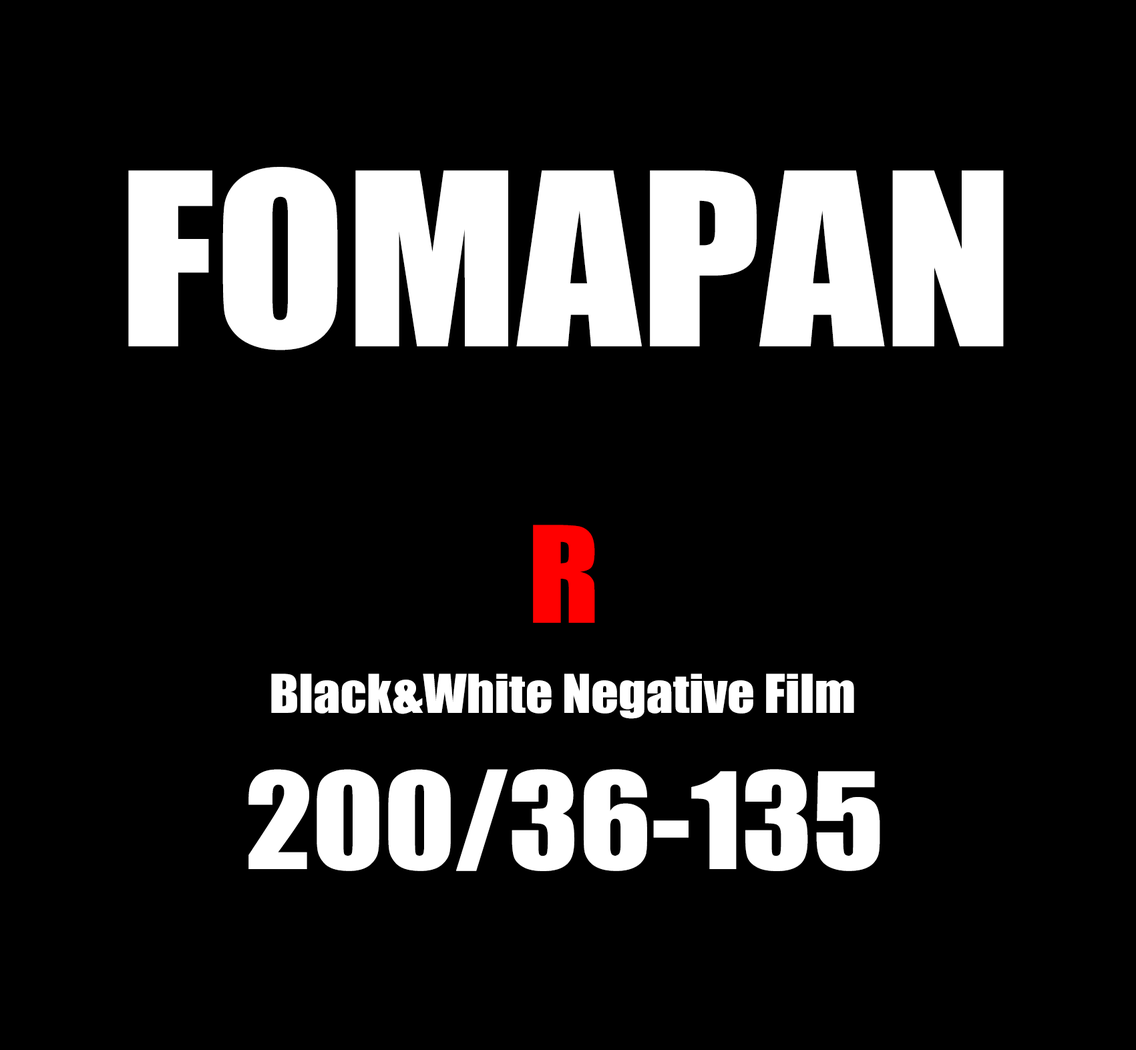
<style>
.page{position:relative;width:1136px;height:1050px;background:#000000}
.page>*{position:absolute;margin:0}
.t1{font:222.2px "Impact";color:#ffffff;scale:1.08 1}
.t2{font:123.4px "Impact";color:#ff0000;scale:1.08 1}
.t3{font:49.4px "Impact";color:#ffffff;scale:1.08 1}
.t4{font:123.4px "Impact";color:#ffffff;scale:1.08 1}
</style>
<div class="page">
<p class="t1" style="left:128px;top:167px;width:875px;height:183px">FOMAPAN</p>
<p class="t2" style="left:533px;top:525px;width:62px;height:98px">R</p>
<p class="t3" style="left:271px;top:674px;width:583px;height:45px">Black&amp;White Negative Film</p>
<p class="t4" style="left:248px;top:769px;width:632px;height:102px">200/36-135</p>
</div>
